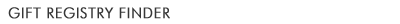
<style>
.page{position:relative;width:400px;height:24px;background:#ffffff}
.page>*{position:absolute;margin:0}
.t1{font:14.7px "FuturaBT-Light";letter-spacing:0.025em;color:#363636;text-transform:uppercase;font-weight:bold}
</style>
<div class="page">
<p class="t1" style="left:8px;top:7px;width:162px;height:12px">gift registry finder</p>
</div>
